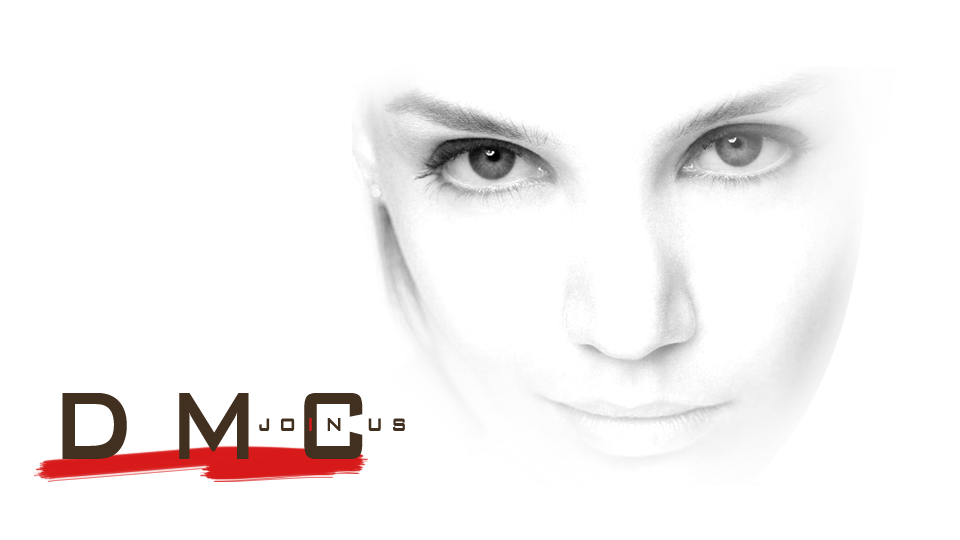
<style>
.page{position:relative;width:960px;height:540px;background:#ffffff}
.page>*{position:absolute;margin:0}
.t1{font:128px "BankGothic-Medium";letter-spacing:0.3em;color:#412f1f;scale:0.8 1}
.t2{font:30px "BankGothic-Medium";letter-spacing:0.3em;color:#412f1f;scale:0.8 1}
.t3{font:30px "BankGothic-Medium";letter-spacing:0.3em;color:#d71919;scale:0.8 1}
</style>
<div class="page">
<p class="t1" style="left:62px;top:393px;width:301px;height:66px">DMC</p>
<p class="t2" style="left:259px;top:418px;width:146px;height:13px">jo<span class="t3">i</span>n us</p>
</div>
